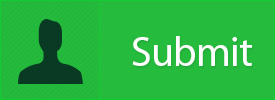
<style>
.page{position:relative;width:275px;height:100px;background:#25bb3d}
.page>*{position:absolute;margin:0}
.t1{font:41.7px "MyriadPro-Regular";letter-spacing:-0.015em;color:#fdfdfd}
</style>
<div class="page">
<p class="t1" style="left:132px;top:36px;width:120px;height:30px">Submit</p>
</div>
